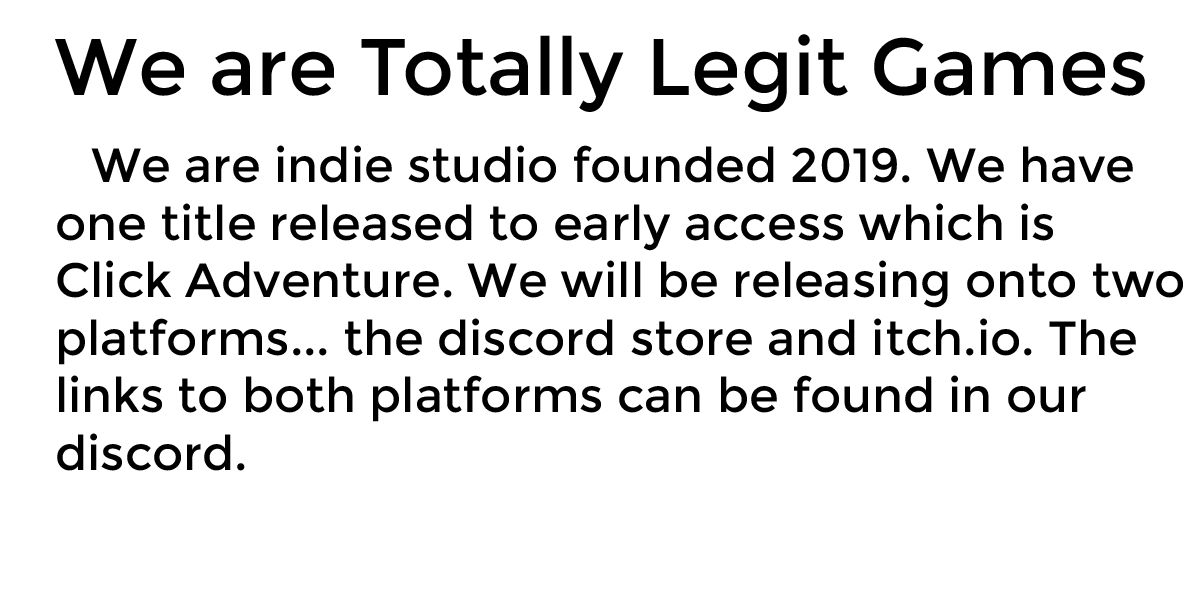
<style>
.page{position:relative;width:1200px;height:600px;background:#ffffff}
.page>*{position:absolute;margin:0}
.t1{font:80px "Montserrat-Regular";color:#000000}
.t2{font:48px "Montserrat-Regular";color:#000000}
</style>
<div class="page">
<p class="t1" style="left:55px;top:34px;width:1090px;height:78px">We are Totally Legit Games</p>
<p class="t2" style="left:57px;top:145px;width:1126px;height:326px">We are indie studio founded 2019. We have<br>one title released to early access which is <br>Click Adventure. We will be releasing onto two<br>platforms... the discord store and itch.io. The <br>links to both platforms can be found in our <br>discord.</p>
</div>
